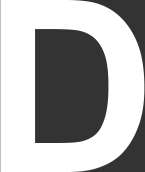
<style>
.page{position:relative;width:145px;height:172px;background:#ffffff}
.page>*{position:absolute;margin:0}
.t1{font:240px "Arial-BoldMT";color:#ffffff}
</style>
<div class="page">
<p class="t1" style="left:0px;top:0px;width:145px;height:172px">D</p>
</div>
